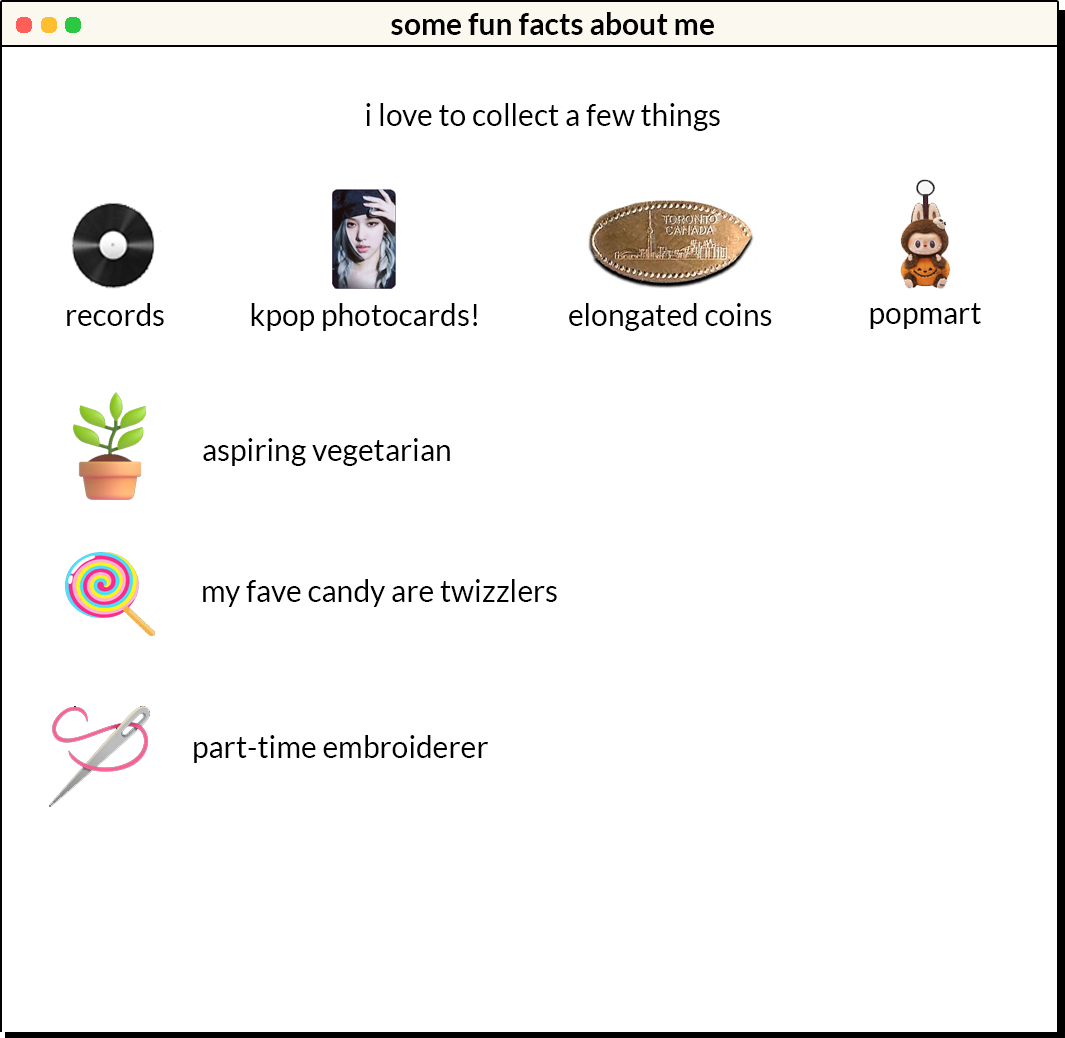
<style>
.page{position:relative;width:1065px;height:1038px;background:#ffffff}
.page>*{position:absolute;margin:0}
.t1{font:30px "Lato-Bold";color:#000000}
.t2{font:30px "Lato-Regular";color:#000000}
</style>
<div class="page">
<p class="t1" style="left:391px;top:12px;width:323px;height:23px">some fun facts about me</p>
<p class="t2" style="left:366px;top:103px;width:354px;height:28px">i love to collect a few things</p>
<p class="t2" style="left:67px;top:303px;width:97px;height:23px">records</p>
<p class="t2" style="left:251px;top:303px;width:226px;height:28px">kpop photocards!</p>
<p class="t2" style="left:569px;top:303px;width:203px;height:28px">elongated coins</p>
<p class="t2" style="left:870px;top:303px;width:111px;height:26px">popmart</p>
<p class="t2" style="left:203px;top:438px;width:247px;height:28px">aspiring vegetarian</p>
<p class="t2" style="left:203px;top:579px;width:354px;height:28px">my fave candy are twizzlers</p>
<p class="t2" style="left:194px;top:735px;width:294px;height:28px">part-time embroiderer</p>
</div>
